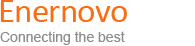
<style>
.page{position:relative;width:195px;height:46px;background:#ffffff}
.page>*{position:absolute;margin:0}
.t1{font:14px "ArialMT";color:#8f8c8c}
</style>
<div class="page">
<p class="t1" style="left:0px;top:31px;width:125px;height:14px">Connecting the best</p>
</div>
